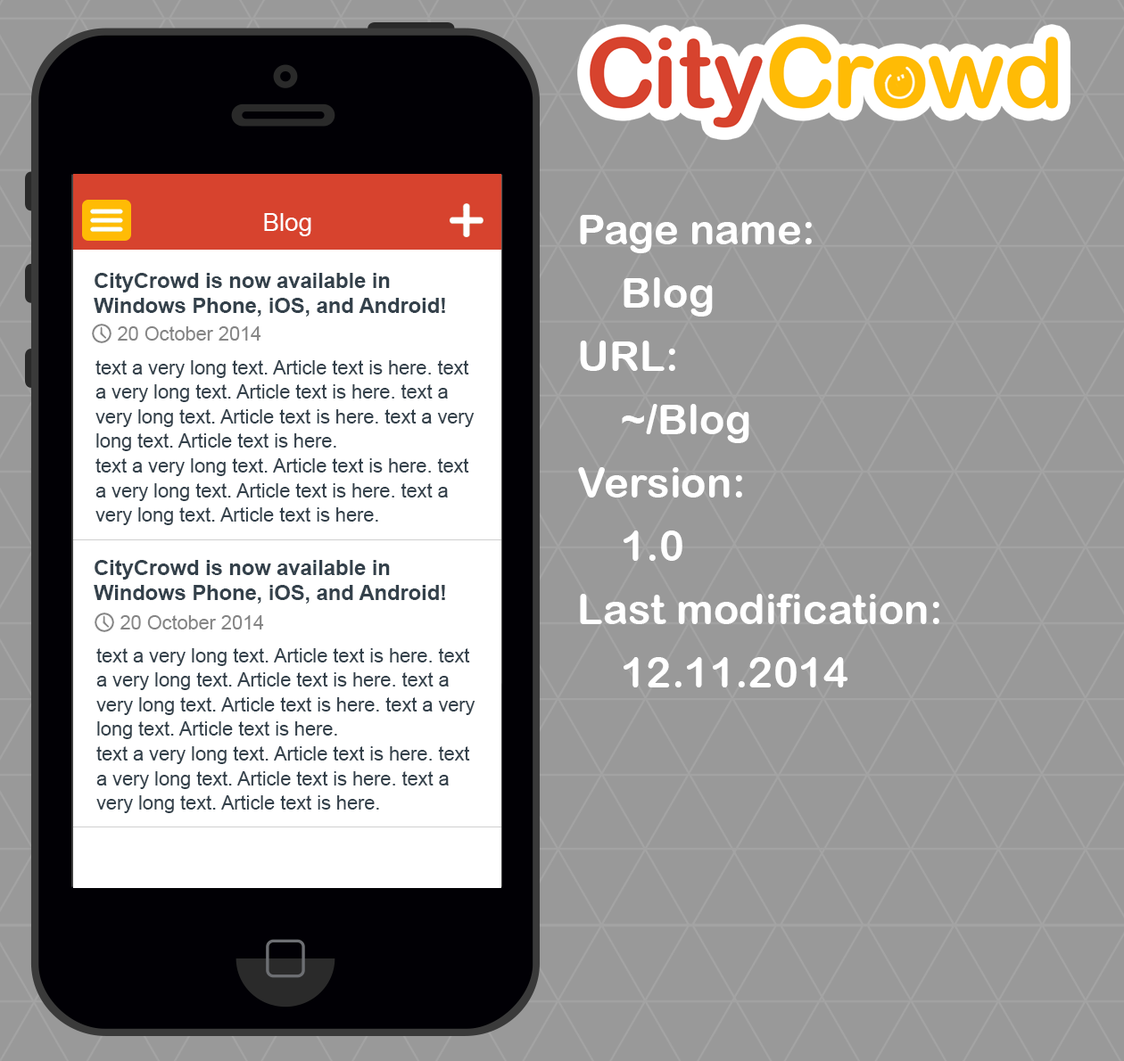
<style>
.page{position:relative;width:1124px;height:1061px;background:#999999}
.page>*{position:absolute;margin:0}
.t1{font:24.6px "ArialMT";color:#ffffff}
.t2{font:42.2px/63.3px "ArialRoundedMTBold";color:#ffffff}
.t3{font:21.1px/24.6px "Arial-BoldMT";color:#34414b}
.t4{font:19.3px "ArialMT";color:#858585}
.t5{font:19.3px/24.6px "ArialMT";color:#34414b}
</style>
<div class="page">
<p class="t1" style="left:264px;top:213px;width:47px;height:23px">Blog</p>
<p class="t2" style="left:578px;top:215px;width:361px;height:473px">Page name:<br>Blog<br>URL:<br>~/Blog<br>Version:<br>1.0<br>Last modification:<br>12.11.2014</p>
<p class="t3" style="left:94px;top:273px;width:351px;height:44px">CityCrowd is now available in Windows Phone, iOS, and Android!</p>
<p class="t4" style="left:118px;top:326px;width:143px;height:15px">20 October 2014</p>
<p class="t5" style="left:95px;top:360px;width:379px;height:165px">text a very long text. Article text is here. text a very long text. Article text is here. text a very long text. Article text is here. text a very long text. Article text is here.<br>text a very long text. Article text is here. text a very long text. Article text is here. text a very long text. Article text is here.</p>
<p class="t3" style="left:94px;top:560px;width:351px;height:44px">CityCrowd is now available in Windows Phone, iOS, and Android!</p>
<p class="t4" style="left:120px;top:615px;width:144px;height:15px">20 October 2014</p>
<p class="t5" style="left:96px;top:648px;width:379px;height:165px">text a very long text. Article text is here. text a very long text. Article text is here. text a very long text. Article text is here. text a very long text. Article text is here.<br>text a very long text. Article text is here. text a very long text. Article text is here. text a very long text. Article text is here.</p>
</div>
